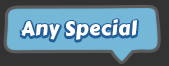
<style>
.page{position:relative;width:169px;height:66px;background:#74b7d7}
.page>*{position:absolute;margin:0}
.t1{font:20px "CarterOne";letter-spacing:0.025em;color:#ffffff}
</style>
<div class="page">
<p class="t1" style="left:21px;top:19px;width:116px;height:21px">Any Special</p>
</div>
